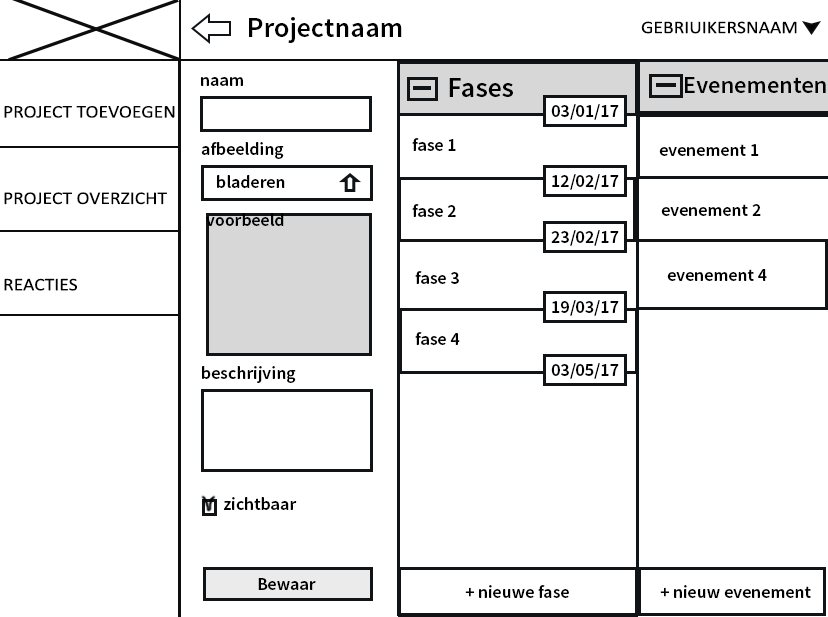
<style>
.page{position:relative;width:828px;height:617px;background:#ffffff}
.page>*{position:absolute;margin:0}
.t1{font:28.2px "SourceSansPro-Semibold";color:#000000}
.t2{font:18px "Calibri";color:#000000;scale:1.09 1}
.t3{font:18px "SourceSansPro-Semibold";color:#000000}
.t4{font:24.4px "SourceSansPro-Semibold";color:#000000}
</style>
<div class="page">
<p class="t1" style="left:249px;top:17px;width:153px;height:26px">Projectnaam</p>
<p class="t2" style="left:641px;top:21px;width:156px;height:13px">GEBRIUIKERSNAAM</p>
<p class="t3" style="left:201px;top:77px;width:42px;height:9px">naam</p>
<p class="t1" style="left:449px;top:78px;width:64px;height:19px">Fases</p>
<p class="t4" style="left:685px;top:77px;width:141px;height:16px">Evenementen</p>
<p class="t2" style="left:4px;top:106px;width:171px;height:185px">PROJECT TOEVOEGEN<br><br><br><br>PROJECT OVERZICHT<br><br><br><br>REACTIES</p>
<p class="t3" style="left:551px;top:104px;width:68px;height:16px">03/01/17</p>
<p class="t3" style="left:201px;top:142px;width:83px;height:17px">afbeelding</p>
<p class="t3" style="left:412px;top:138px;width:44px;height:13px">fase 1</p>
<p class="t3" style="left:659px;top:144px;width:100px;height:12px">evenement 1</p>
<p class="t3" style="left:552px;top:174px;width:67px;height:16px">12/02/17</p>
<p class="t3" style="left:217px;top:175px;width:68px;height:13px">bladeren</p>
<p class="t3" style="left:412px;top:204px;width:44px;height:13px">fase 2</p>
<p class="t3" style="left:661px;top:204px;width:100px;height:12px">evenement 2</p>
<p class="t3" style="left:206px;top:213px;width:78px;height:13px">voorbeeld</p>
<p class="t3" style="left:551px;top:230px;width:68px;height:16px">23/02/17</p>
<p class="t3" style="left:667px;top:269px;width:100px;height:12px">evenement 4</p>
<p class="t3" style="left:415px;top:271px;width:44px;height:13px">fase 3</p>
<p class="t3" style="left:552px;top:300px;width:67px;height:16px">19/03/17</p>
<p class="t3" style="left:415px;top:332px;width:45px;height:13px">fase 4</p>
<p class="t3" style="left:202px;top:366px;width:94px;height:17px">beschrijving</p>
<p class="t3" style="left:551px;top:363px;width:68px;height:16px">03/05/17</p>
<p class="t3" style="left:223px;top:497px;width:74px;height:13px">zichtbaar</p>
<p class="t3" style="left:258px;top:578px;width:58px;height:12px">Bewaar</p>
<p class="t3" style="left:465px;top:585px;width:104px;height:13px">+ nieuwe fase</p>
<p class="t3" style="left:660px;top:585px;width:151px;height:13px">+ nieuw evenement</p>
</div>
